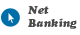
<style>
.page{position:relative;width:80px;height:35px;background:#ffffff}
.page>*{position:absolute;margin:0}
.t1{font:11px "CooperBlackStd-Italic";color:#4b4b4b}
</style>
<div class="page">
<p class="t1" style="left:28px;top:6px;width:49px;height:23px">Net<br>Banking</p>
</div>
